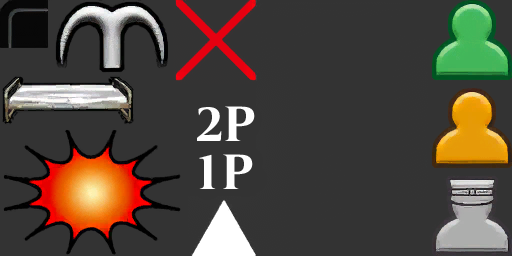
<style>
.page{position:relative;width:512px;height:256px;background:#333333}
.page>*{position:absolute;margin:0}
.t1{font:51.8px "FONTSPRINGDEMO-CandideBold";color:#fefefe}
</style>
<div class="page">
<p class="t1" style="left:197px;top:106px;width:58px;height:35px">2P</p>
<p class="t1" style="left:199px;top:154px;width:54px;height:35px">1P</p>
</div>
